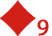
<style>
.page{position:relative;width:52px;height:36px;background:#ffffff}
.page>*{position:absolute;margin:0}
.t1{font:23.4px "MyriadPro-Regular";letter-spacing:-0.1em;color:#d22018;font-weight:bold}
</style>
<div class="page">
<p class="t1" style="left:37px;top:19px;width:12px;height:17px">9</p>
</div>
